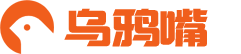
<style>
.page{position:relative;width:241px;height:54px;background:#ffffff}
.page>*{position:absolute;margin:0}
.t1{font:48px "MFLingHei_Noncommercial-Regular";color:#f05e1c}
</style>
<div class="page">
<p class="t1" style="left:64px;top:8px;width:144px;height:39px">乌鸦嘴</p>
</div>
